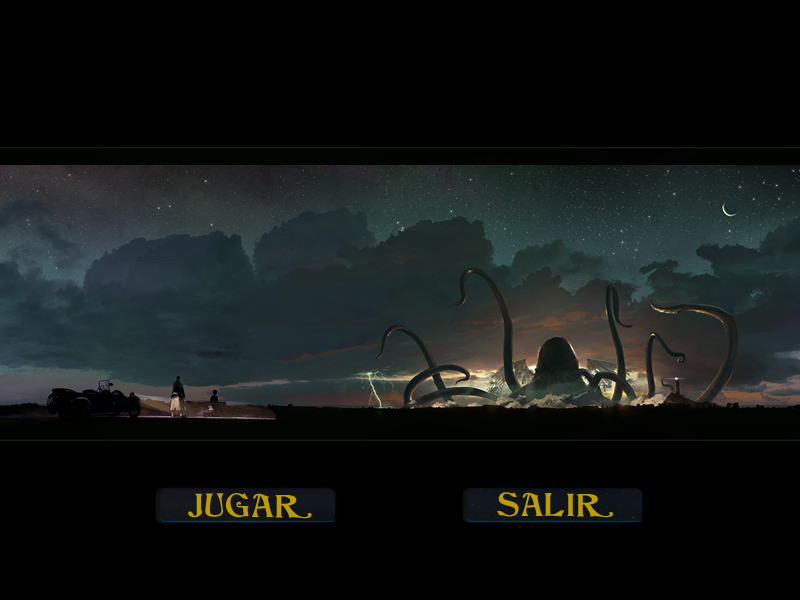
<style>
.page{position:relative;width:800px;height:600px;background:#000000}
.page>*{position:absolute;margin:0}
.t1{font:30px "Columbus";color:#be9c00}
</style>
<div class="page">
<p class="t1" style="left:188px;top:493px;width:124px;height:26px">JUGAR</p>
<p class="t1" style="left:496px;top:492px;width:117px;height:26px">SALIR</p>
</div>
